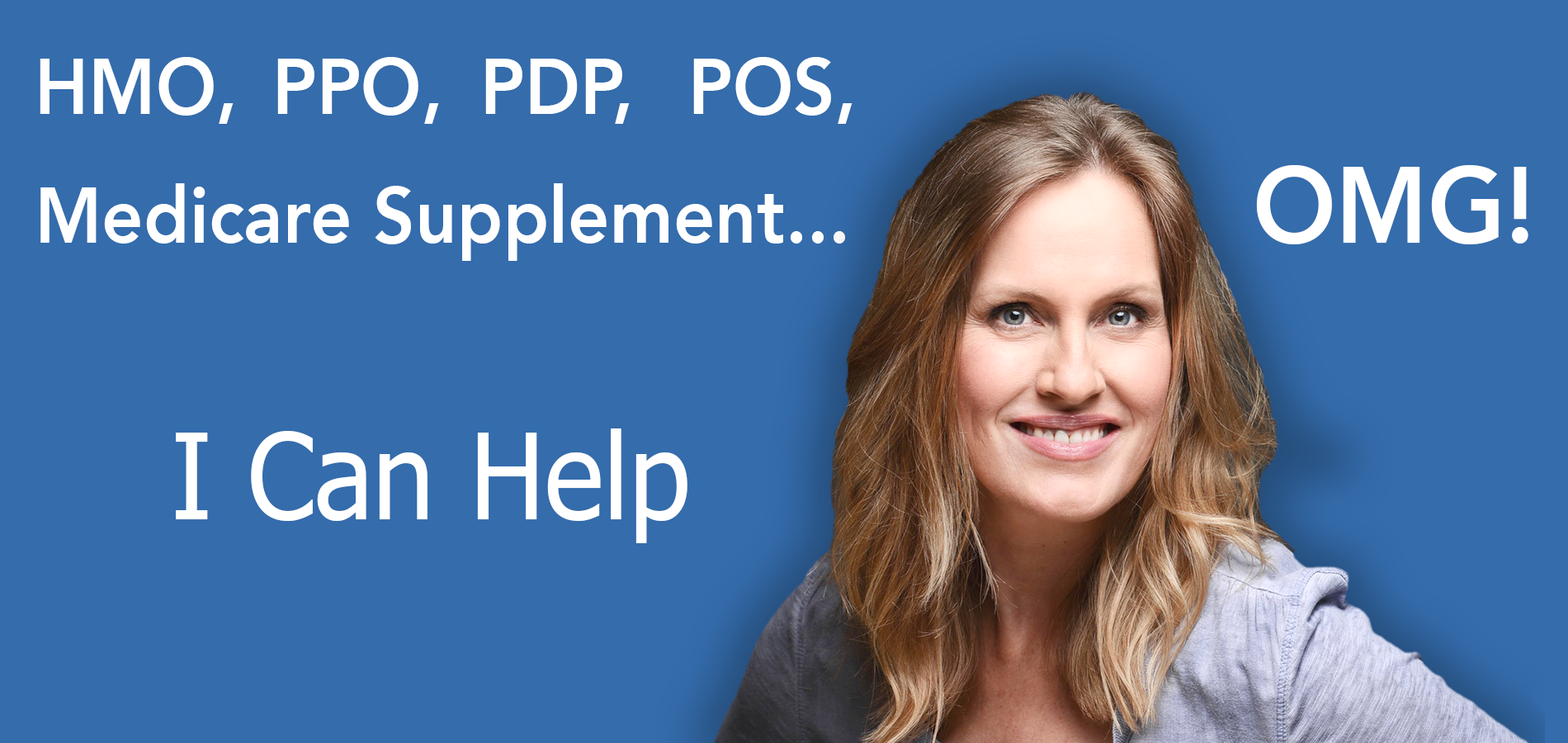
<style>
.page{position:relative;width:1568px;height:743px;background:#346cac}
.page>*{position:absolute;margin:0}
.t1{font:78.4px "Avenir-Heavy";color:#ffffff;scale:0.93 1}
.t2{font:107.3px "Avenir-Heavy";color:#ffffff;scale:0.93 1}
.t3{font:119.7px "Tahoma";color:#ffffff;scale:0.93 1}
</style>
<div class="page">
<p class="t1" style="left:40px;top:57px;width:1488px;height:204px">HMO,  PPO,  PDP,  POS,<br>Medicare Supplement...              <span class="t2">OMG!</span></p>
<p class="t3" style="left:176px;top:428px;width:511px;height:115px">I Can Help</p>
</div>
